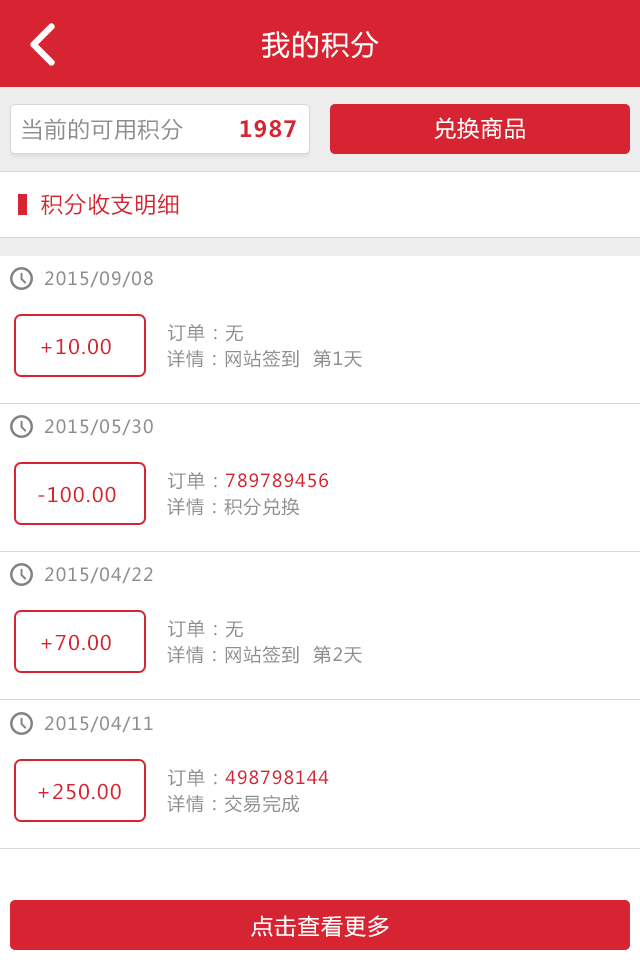
<style>
.page{position:relative;width:640px;height:960px;background:#ffffff}
.page>*{position:absolute;margin:0}
.t1{font:28px "MicrosoftYaHei";letter-spacing:0.06em;color:#ffffff}
.t2{font:22px "MicrosoftYaHei";letter-spacing:0.06em;color:#8e8e8e}
.t3{font:22px "MicrosoftYaHei-Bold";letter-spacing:0.06em;color:#d62432}
.t4{font:22px "MicrosoftYaHei";letter-spacing:0.06em;color:#ffffff}
.t5{font:22px "MicrosoftYaHei";letter-spacing:0.06em;color:#d62432}
.t6{font:18px "MicrosoftYaHei";letter-spacing:0.06em;color:#8e8e8e}
.t7{font:20px "MicrosoftYaHei";letter-spacing:0.06em;color:#d62432}
.t8{font:18px "MicrosoftYaHei";letter-spacing:0.06em;color:#d62432}
</style>
<div class="page">
<p class="t1" style="left:262px;top:31px;width:117px;height:28px">我的积分</p>
<p class="t2" style="left:22px;top:118px;width:274px;height:23px">当前的可用积分　　 <span class="t3">1987</span></p>
<p class="t4" style="left:434px;top:117px;width:91px;height:22px">兑换商品</p>
<p class="t5" style="left:41px;top:193px;width:138px;height:23px">积分收支明细</p>
<p class="t6" style="left:45px;top:271px;width:108px;height:17px">2015/09/08</p>
<p class="t6" style="left:168px;top:324px;width:75px;height:18px">订单：无</p>
<p class="t7" style="left:41px;top:338px;width:70px;height:17px">+10.00</p>
<p class="t6" style="left:167px;top:349px;width:195px;height:19px">详情：网站签到  第1天</p>
<p class="t6" style="left:45px;top:419px;width:108px;height:17px">2015/05/30</p>
<p class="t8" style="left:168px;top:472px;width:160px;height:18px"><span class="t6">订单：</span>789789456</p>
<p class="t7" style="left:38px;top:486px;width:78px;height:17px">-100.00</p>
<p class="t6" style="left:167px;top:497px;width:133px;height:19px">详情：积分兑换</p>
<p class="t6" style="left:45px;top:567px;width:108px;height:17px">2015/04/22</p>
<p class="t6" style="left:168px;top:620px;width:75px;height:18px">订单：无</p>
<p class="t7" style="left:41px;top:634px;width:70px;height:17px">+70.00</p>
<p class="t6" style="left:167px;top:645px;width:195px;height:19px">详情：网站签到  第2天</p>
<p class="t6" style="left:45px;top:716px;width:108px;height:17px">2015/04/11</p>
<p class="t8" style="left:168px;top:769px;width:161px;height:18px"><span class="t6">订单：</span>498798144</p>
<p class="t7" style="left:38px;top:783px;width:83px;height:17px">+250.00</p>
<p class="t6" style="left:167px;top:794px;width:133px;height:19px">详情：交易完成</p>
<p class="t4" style="left:251px;top:915px;width:138px;height:22px">点击查看更多</p>
</div>
